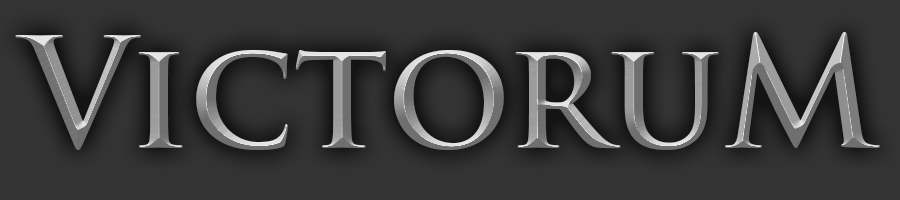
<style>
.page{position:relative;width:900px;height:200px;background:#333333}
.page>*{position:absolute;margin:0}
.t1{font:150px "TrajanPro-Bold"}
</style>
<div class="page">
<p class="t1" style="left:15px;top:32px;width:865px;height:119px">VictoruM</p>
</div>
